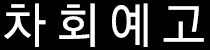
<style>
.page{position:relative;width:210px;height:50px;background:#000000}
.page>*{position:absolute;margin:0}
.t1{font:48.8px "KoPubDotumMedium";letter-spacing:0.22em;color:#ffffff}
</style>
<div class="page">
<p class="t1" style="left:4px;top:3px;width:200px;height:44px">차회예고</p>
</div>
